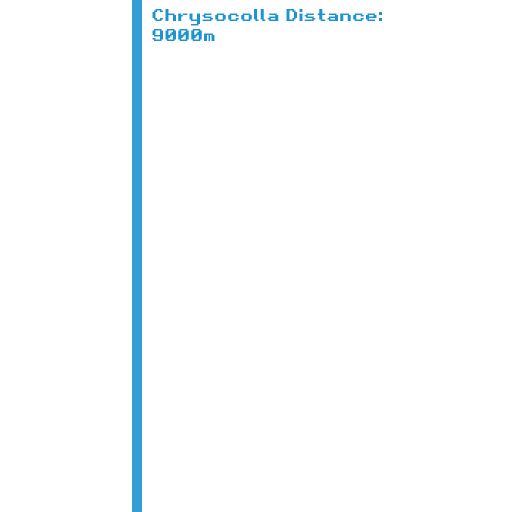
<style>
.page{position:relative;width:512px;height:512px;background:#ffffff}
.page>*{position:absolute;margin:0}
.t1{font:16.7px "RetroGaming";color:#1e93cf}
</style>
<div class="page">
<p class="t1" style="left:152px;top:9px;width:230px;height:32px">Chrysocolla Distance:<br>9000m</p>
</div>
